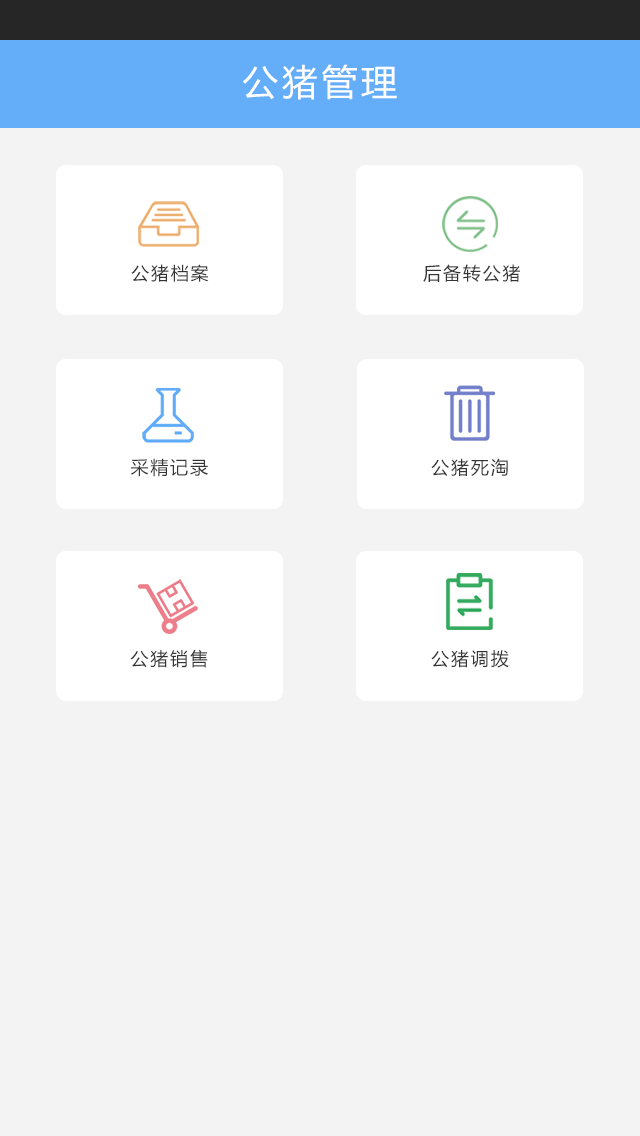
<style>
.page{position:relative;width:640px;height:1136px;background:#f3f3f3}
.page>*{position:absolute;margin:0}
.t1{font:36px "MicrosoftYaHei";letter-spacing:0.1em;color:#ffffff}
.t2{font:18px "MicrosoftYaHei";letter-spacing:0.1em;color:#353535}
</style>
<div class="page">
<p class="t1" style="left:243px;top:64px;width:154px;height:36px">公猪管理</p>
<p class="t2" style="left:131px;top:264px;width:78px;height:18px">公猪档案</p>
<p class="t2" style="left:423px;top:264px;width:97px;height:18px">后备转公猪</p>
<p class="t2" style="left:130px;top:458px;width:78px;height:19px">采精记录</p>
<p class="t2" style="left:431px;top:458px;width:77px;height:18px">公猪死淘</p>
<p class="t2" style="left:130px;top:649px;width:78px;height:19px">公猪销售</p>
<p class="t2" style="left:431px;top:650px;width:78px;height:18px">公猪调拨</p>
</div>
